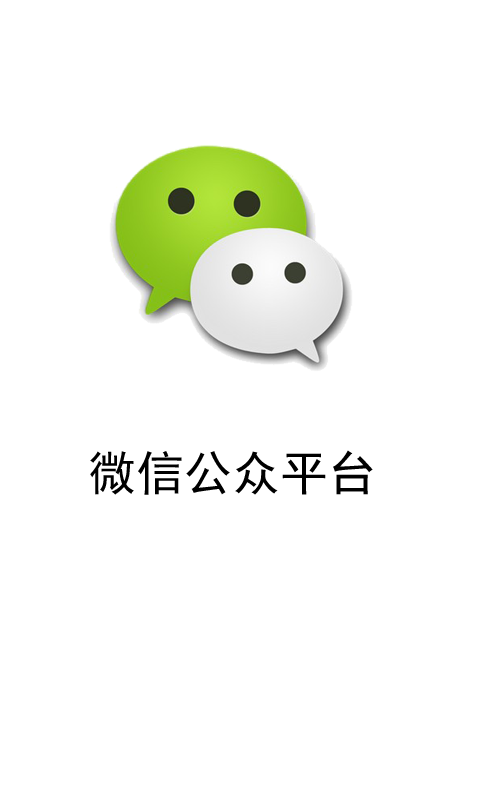
<style>
.page{position:relative;width:480px;height:800px;background:#ffffff}
.page>*{position:absolute;margin:0}
.t1{font:48px "SimHei";color:#000000}
</style>
<div class="page">
<p class="t1" style="left:90px;top:450px;width:283px;height:45px">微信公众平台</p>
</div>
